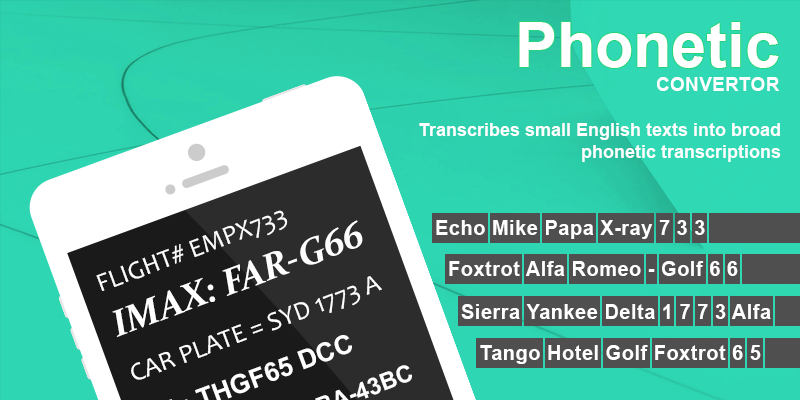
<style>
.page{position:relative;width:800px;height:400px}
.page>*{position:absolute;margin:0}
.t1{font:62.6px "Arial-BoldMT";color:#fefffe}
.t2{font:19.4px "Arial-BoldMT";color:#fefffe}
.t3{font:18px "Arial-BoldMT";color:#fefffe}
.t4{font:20px "Arial-BoldMT";letter-spacing:0.025em;color:#fefffe}
</style>
<div class="page">
<p class="t1" style="left:519px;top:22px;width:260px;height:46px">Phonetic</p>
<p class="t2" style="left:657px;top:77px;width:123px;height:14px">CONVERTOR</p>
<p class="t3" style="left:419px;top:123px;width:362px;height:39px;text-align:right">Transcribes small English texts into broad<br>phonetic transcriptions</p>
<p class="t4" style="left:436px;top:220px;width:269px;height:19px">Echo Mike Papa X-ray 7 3 3</p>
<p class="t4" style="left:449px;top:261px;width:289px;height:15px">Foxtrot Alfa Romeo - Golf 6 6</p>
<p class="t4" style="left:461px;top:304px;width:310px;height:15px">Sierra Yankee Delta 1 7 7 3 Alfa</p>
<p class="t4" style="left:480px;top:345px;width:281px;height:19px">Tango Hotel Golf Foxtrot 6 5</p>
</div>
